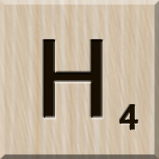
<style>
.page{position:relative;width:159px;height:159px}
.page>*{position:absolute;margin:0}
.t1{font:116px "MS-UIGothic";color:#180e01}
.t2{font:36px "MS-UIGothic";color:#1c1101;font-weight:bold;scale:1.1 1}
</style>
<div class="page">
<p class="t1" style="left:43px;top:40px;width:60px;height:78px">H</p>
<p class="t2" style="left:119px;top:104px;width:20px;height:27px">4</p>
</div>
